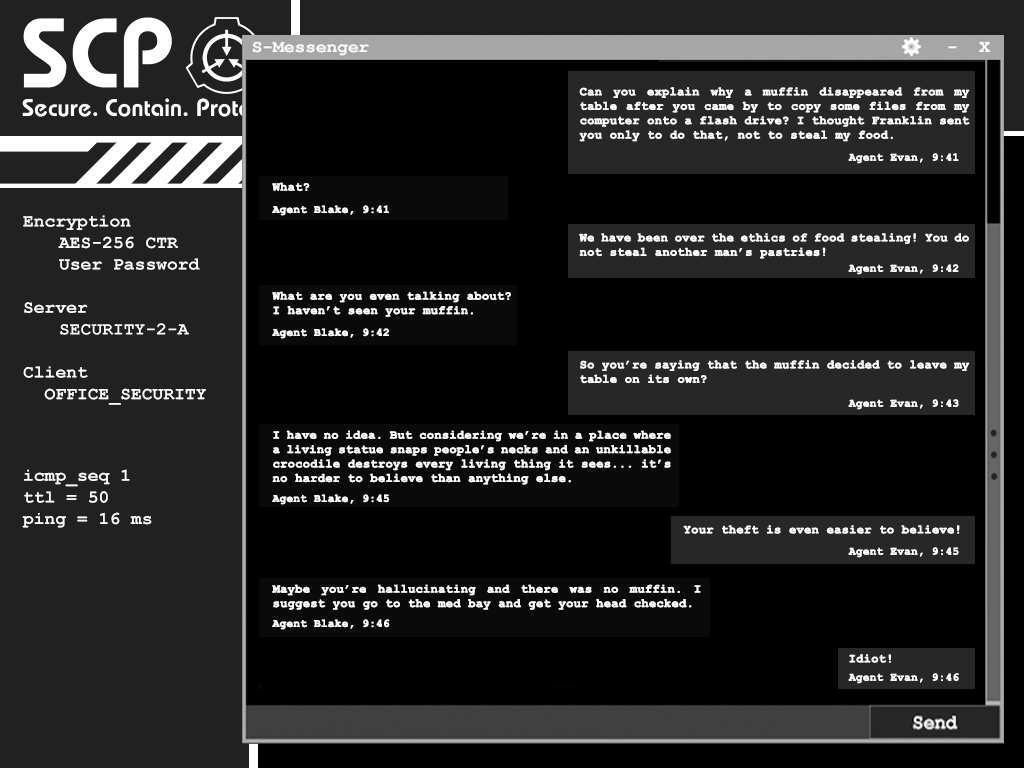
<style>
.page{position:relative;width:1024px;height:768px;background:#000000}
.page>*{position:absolute;margin:0}
.t1{font:12px "CourierNewPS-BoldMT";color:#ffffff;font-weight:bold}
.t2{font:11px "CourierNewPS-BoldMT";color:#ffffff;font-weight:bold}
.t3{font:18px "CourierNewPS-BoldMT";color:#ffffff}
</style>
<div class="page">
<p class="t1" style="left:579px;top:87px;width:391px;height:55px;text-align:justify">Can you explain why a muffin disappeared from my table after you came by to copy some files from my computer onto a flash drive? I thought Franklin sent you only to do that, not to steal my food.</p>
<p class="t2" style="left:848px;top:153px;width:111px;height:11px">Agent Evan, 9:41</p>
<p class="t1" style="left:272px;top:182px;width:38px;height:9px">What?</p>
<p class="t2" style="left:272px;top:205px;width:117px;height:11px">Agent Blake, 9:41</p>
<p class="t3" style="left:22px;top:215px;width:184px;height:313px">Encryption <br> AES-256 CTR<br> User Password<br><br>Server<br> RESEARCH_3_A<br><br>Client<br>  OFFICE_SECURITY<br><br><br><br>icmp_seq 1 <br>ttl = 50 <br>ping = 16 ms</p>
<p class="t1" style="left:579px;top:233px;width:390px;height:26px;text-align:justify">We have been over the ethics of food stealing! You do not steal another man’s pastries!</p>
<p class="t2" style="left:848px;top:264px;width:111px;height:11px">Agent Evan, 9:42</p>
<p class="t1" style="left:272px;top:291px;width:239px;height:26px;text-align:justify">What are you even talking about? I haven’t seen your muffin.</p>
<p class="t2" style="left:272px;top:328px;width:117px;height:11px">Agent Blake, 9:42</p>
<p class="t1" style="left:580px;top:360px;width:390px;height:24px;text-align:justify">So you’re saying that the muffin decided to leave my table on its own?</p>
<p class="t2" style="left:848px;top:399px;width:111px;height:11px">Agent Evan, 9:43</p>
<p class="t1" style="left:272px;top:430px;width:399px;height:55px;text-align:justify">I have no idea. But considering we’re in a place where a living statue snaps people’s necks and an unkillable crocodile destroys every living thing it sees... it’s no harder to believe than anything else.</p>
<p class="t2" style="left:272px;top:494px;width:118px;height:11px">Agent Blake, 9:45</p>
<p class="t1" style="left:683px;top:525px;width:277px;height:9px">Your theft is even easier to believe!</p>
<p class="t2" style="left:848px;top:547px;width:111px;height:11px">Agent Evan, 9:45</p>
<p class="t1" style="left:272px;top:584px;width:429px;height:26px;text-align:justify">Maybe you’re hallucinating and there was no muffin. I suggest you go to the med bay and get your head checked.</p>
<p class="t2" style="left:272px;top:619px;width:118px;height:11px">Agent Blake, 9:46</p>
<p class="t1" style="left:849px;top:654px;width:42px;height:9px">Idiot!</p>
<p class="t2" style="left:848px;top:673px;width:111px;height:11px">Agent Evan, 9:46</p>
</div>
